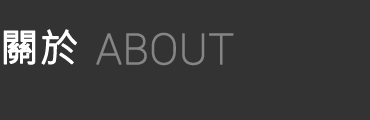
<style>
.page{position:relative;width:370px;height:120px;background:#333333}
.page>*{position:absolute;margin:0}
.t1{font:38.7px "MicrosoftJhengHeiRegular";color:#ffffff;font-weight:bold}
.t2{font:42.6px "Roboto-Thin";color:#858585;font-weight:bold}
</style>
<div class="page">
<p class="t1" style="left:3px;top:29px;width:74px;height:36px">關於</p>
<p class="t2" style="left:96px;top:32px;width:138px;height:34px">ABOUT</p>
</div>
